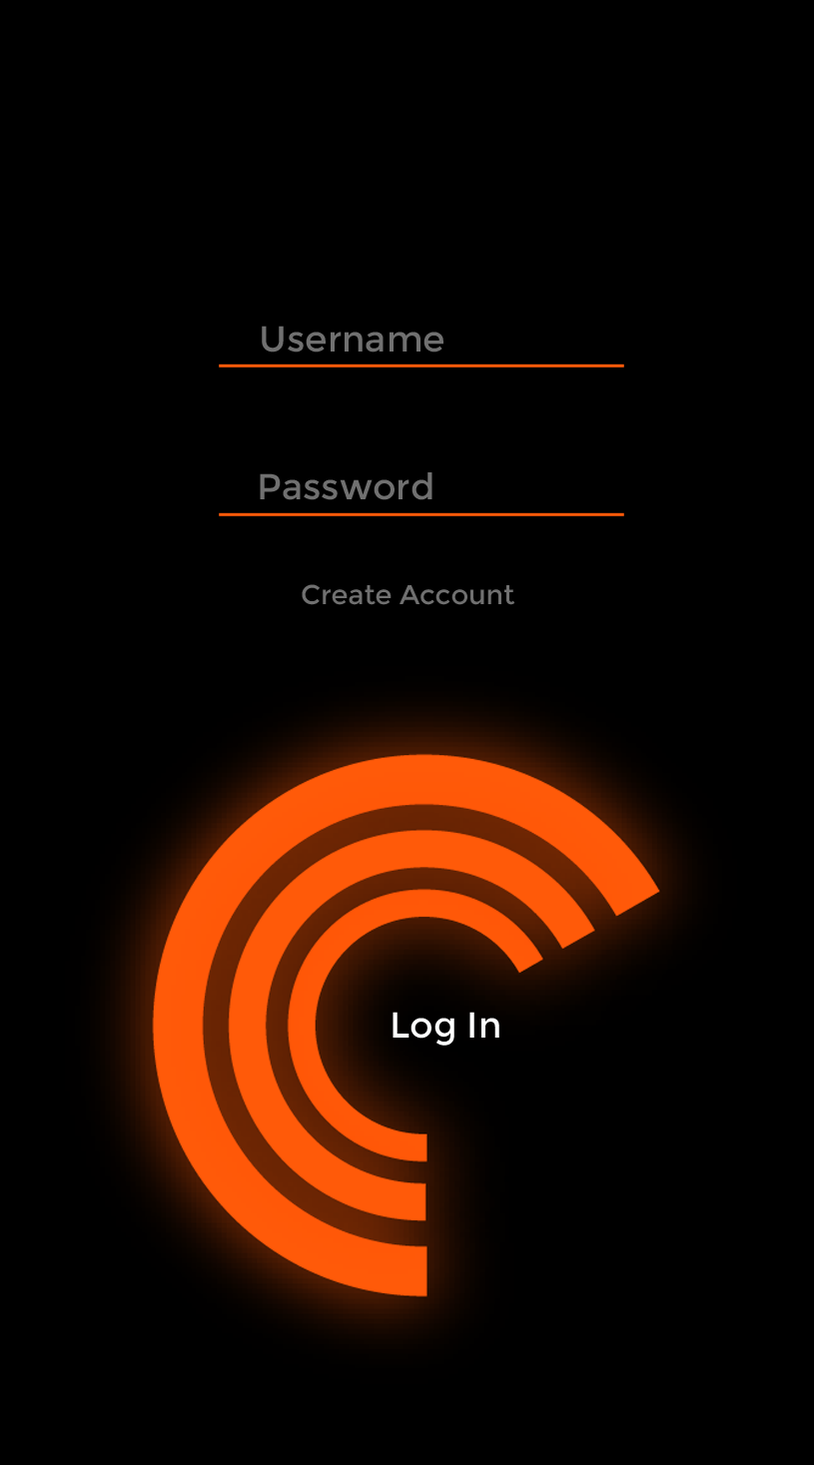
<style>
.page{position:relative;width:814px;height:1465px;background:#000000}
.page>*{position:absolute;margin:0}
.t1{font:36.2px "Montserrat-Regular";color:#707070}
.t2{font:27.1px "Montserrat-Regular";color:#707070}
.t3{font:36.2px "Montserrat-Regular";color:#ffffff}
</style>
<div class="page">
<p class="t1" style="left:262px;top:326px;width:181px;height:27px">Username</p>
<p class="t1" style="left:260px;top:472px;width:172px;height:28px">Password</p>
<p class="t2" style="left:302px;top:584px;width:213px;height:21px">Create Account</p>
<p class="t3" style="left:392px;top:1012px;width:107px;height:34px">Log In</p>
</div>
